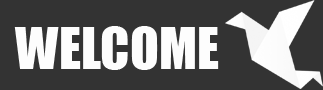
<style>
.page{position:relative;width:323px;height:90px;background:#333333}
.page>*{position:absolute;margin:0}
.t1{font:53.3px "Impact";color:#fdfdfd}
</style>
<div class="page">
<p class="t1" style="left:14px;top:26px;width:205px;height:44px">WELCOME</p>
</div>
